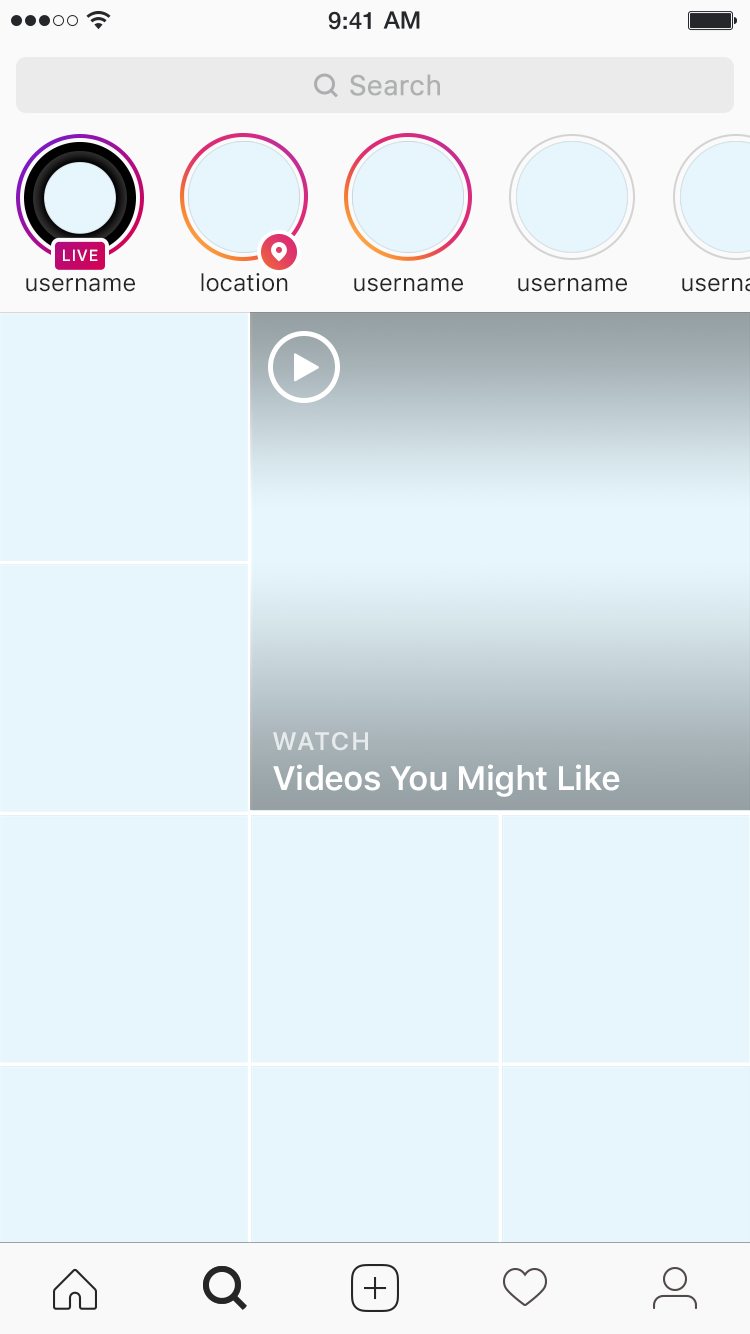
<style>
.page{position:relative;width:750px;height:1334px;background:#e6f6fc}
.page>*{position:absolute;margin:0}
.t1{font:28px "SFUIText-Regular";letter-spacing:-0.005em;color:#afb0b1;font-weight:bold}
.t2{font:16px "SFUIText-Medium";letter-spacing:0.042em;color:#ffffff}
.t3{font:24px "SFUIText-Regular";color:#262626}
.t4{font:25.3px "SFUIDisplay-Semibold";letter-spacing:0.1em;color:#ffffff;text-transform:uppercase}
.t5{font:33.8px "SFUIText-Semibold";letter-spacing:-0.025em;color:#ffffff}
</style>
<div class="page">
<p class="t1" style="left:350px;top:74px;width:90px;height:22px">Search</p>
<p class="t2" style="left:63px;top:249px;width:35px;height:12px">LIVE</p>
<p class="t3" style="left:26px;top:278px;width:109px;height:14px">username</p>
<p class="t3" style="left:201px;top:273px;width:87px;height:19px">location</p>
<p class="t3" style="left:354px;top:278px;width:109px;height:14px">username</p>
<p class="t3" style="left:518px;top:278px;width:109px;height:14px">username</p>
<p class="t4" style="left:273px;top:732px;width:95px;height:19px;opacity:0.7">Watch</p>
<p class="t5" style="left:273px;top:764px;width:347px;height:33px">Videos You Might Like</p>
</div>
